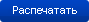
<style>
.page{position:relative;width:89px;height:22px}
.page>*{position:absolute;margin:0}
.t1{font:11px "ArialMT";color:#ffffff}
</style>
<div class="page">
<p class="t1" style="left:13px;top:6px;width:64px;height:8px">Распечатать</p>
</div>
